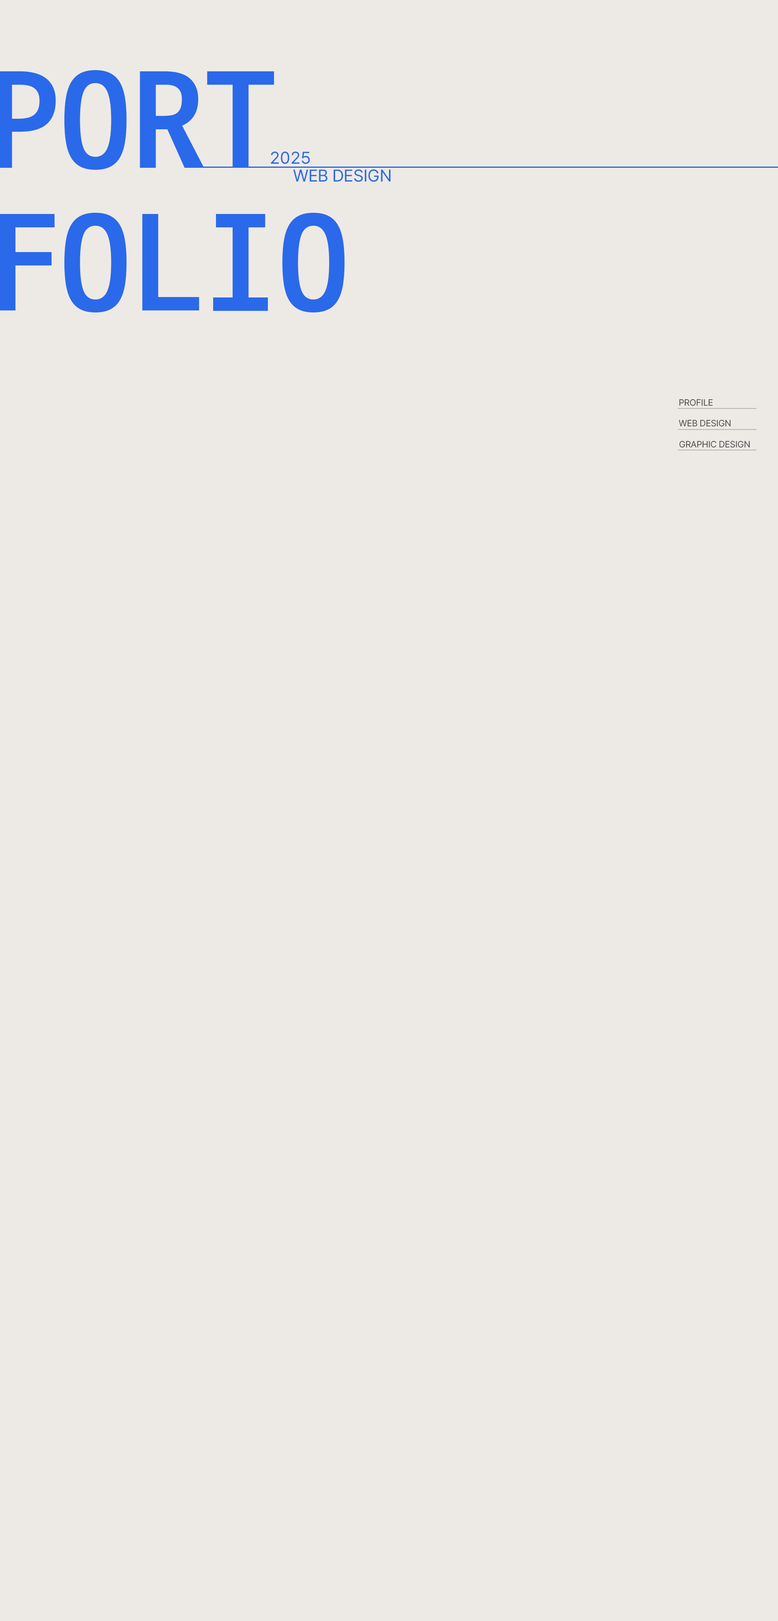
<style>
.page{position:relative;width:778px;height:1621px;background:#edeae5}
.page>*{position:absolute;margin:0}
.t1{font:16.9px "Pretendard-Regular";letter-spacing:0.01em;color:#2a69ea;text-transform:uppercase}
.t2{font:16.9px "Pretendard-Regular";letter-spacing:-0.02em;color:#2a69ea;text-transform:uppercase}
.t3{font:9px "Pretendard-Regular";letter-spacing:-0.02em;color:#4e4e4e;text-transform:uppercase}
</style>
<div class="page">
<p class="t1" style="left:271px;top:152px;width:39px;height:12px">2025</p>
<p class="t2" style="left:293px;top:169px;width:98px;height:13px">Web Design</p>
<p class="t3" style="left:679px;top:399px;width:34px;height:7px">PROFILE</p>
<p class="t3" style="left:679px;top:419px;width:52px;height:8px">WEB DESIGN</p>
<p class="t3" style="left:679px;top:441px;width:71px;height:7px">GRAPHIC DESIGN</p>
</div>
